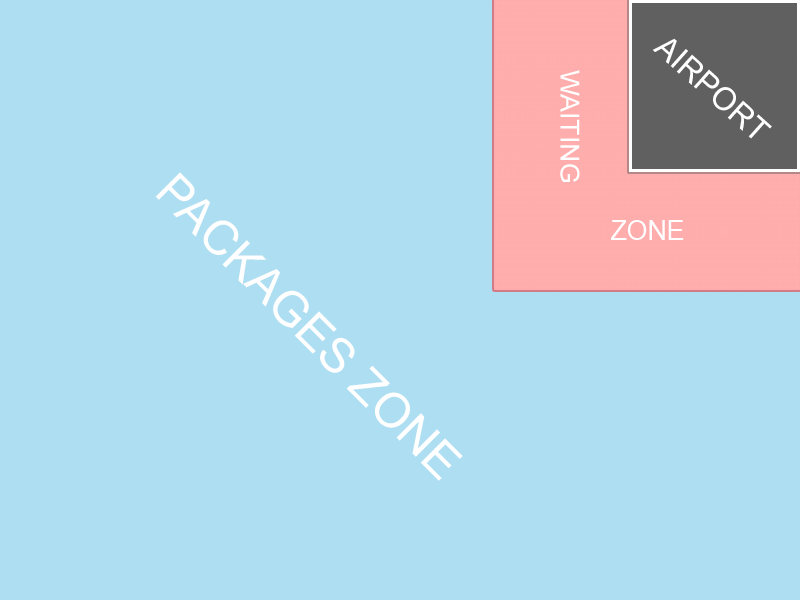
<style>
.page{position:relative;width:800px;height:600px;background:#addef2}
.page>*{position:absolute;margin:0}
.t1{font:31.7px "ArialMT";color:#ffffff}
.t2{font:26.2px "ArialMT";color:#ffffff}
.t3{font:48px "ArialMT";color:#ffffff}
.t4{font:26.7px "ArialMT";color:#ffffff}
</style>
<div class="page">
<p class="t1" style="left:652px;top:38px;width:120px;height:101px;rotate:42deg">AIRPORT</p>
<p class="t2" style="left:560px;top:70px;width:20px;height:112px;rotate:90deg">WAITING</p>
<p class="t3" style="left:155px;top:172px;width:308px;height:309px;rotate:45deg">PACKAGES ZONE</p>
<p class="t4" style="left:611px;top:220px;width:73px;height:20px">ZONE</p>
</div>
